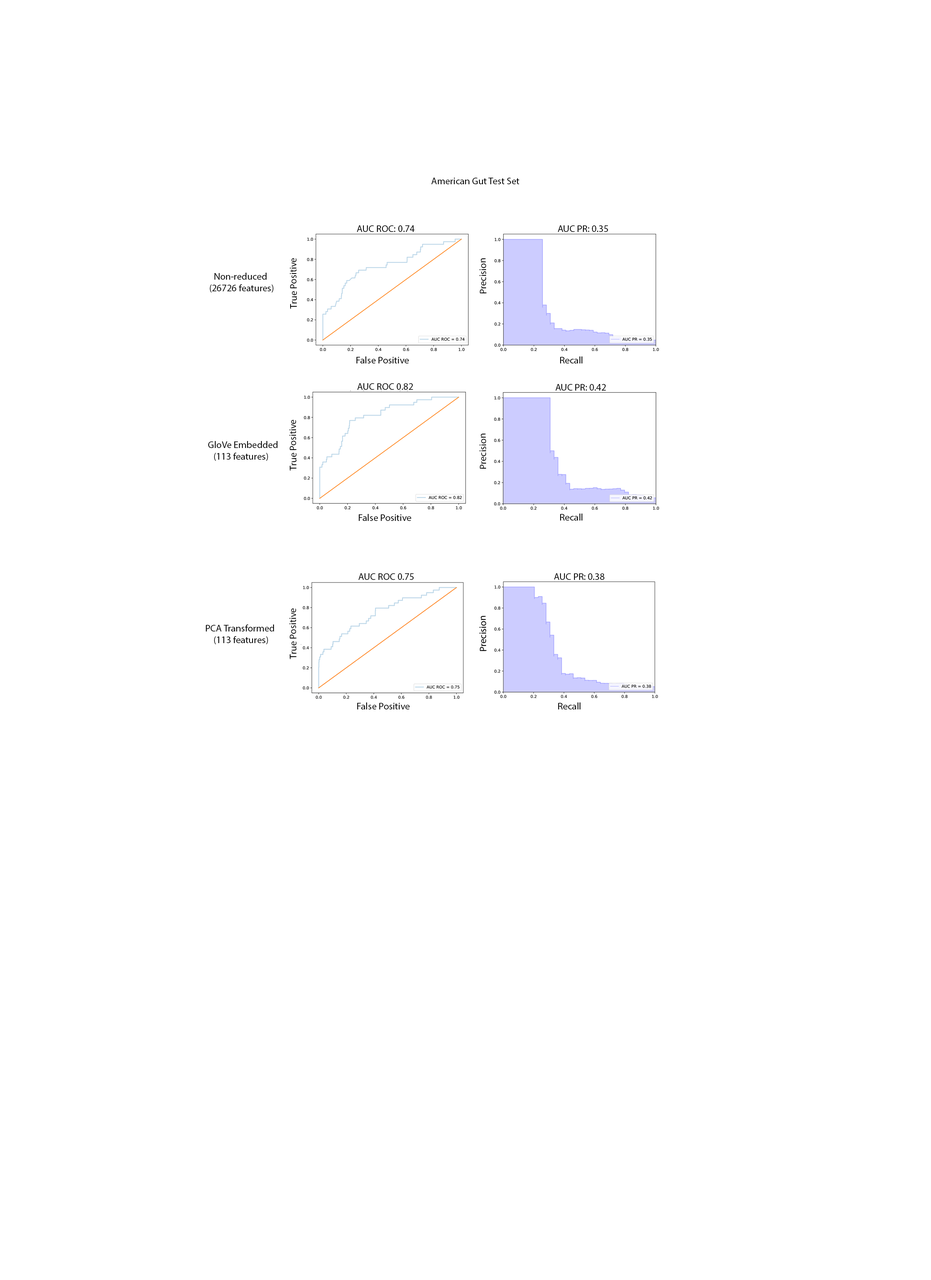
<style>
.page{position:relative;width:931px;height:1280px;background:#ffffff}
.page>*{position:absolute;margin:0}
.t1{font:9.7px "MyriadPro-Regular";color:#000000}
</style>
<div class="page">
<p class="t1" style="left:431px;top:178px;width:89px;height:6px">American Gut Test Set</p>
<p class="t1" style="left:357px;top:225px;width:58px;height:7px">AUC ROC: 0.74</p>
<p class="t1" style="left:558px;top:225px;width:50px;height:7px">AUC PR: 0.35</p>
<p class="t1" style="left:290px;top:258px;width:7px;height:51px;rotate:-91deg">True Positive</p>
<p class="t1" style="left:480px;top:258px;width:7px;height:36px;rotate:-91deg">Precision</p>
<p class="t1" style="left:210px;top:273px;width:64px;height:20px;text-align:center">Non-reduced<br> (26726 features)</p>
<p class="t1" style="left:357px;top:357px;width:52px;height:7px">False Positive</p>
<p class="t1" style="left:560px;top:357px;width:23px;height:7px">Recall</p>
<p class="t1" style="left:357px;top:383px;width:56px;height:7px">AUC ROC 0.82</p>
<p class="t1" style="left:556px;top:384px;width:50px;height:7px">AUC PR: 0.42</p>
<p class="t1" style="left:289px;top:420px;width:8px;height:51px;rotate:-91deg">True Positive</p>
<p class="t1" style="left:480px;top:434px;width:7px;height:35px;rotate:-91deg">Precision</p>
<p class="t1" style="left:208px;top:441px;width:70px;height:20px;text-align:center">GloVe Embedded<br> (113 features)</p>
<p class="t1" style="left:359px;top:514px;width:52px;height:7px">False Positive</p>
<p class="t1" style="left:560px;top:514px;width:23px;height:7px">Recall</p>
<p class="t1" style="left:359px;top:573px;width:55px;height:7px">AUC ROC 0.75</p>
<p class="t1" style="left:554px;top:573px;width:51px;height:7px">AUC PR: 0.38</p>
<p class="t1" style="left:289px;top:608px;width:8px;height:52px;rotate:-91deg">True Positive</p>
<p class="t1" style="left:206px;top:625px;width:68px;height:20px;text-align:center">PCA Transformed<br> (113 features)</p>
<p class="t1" style="left:357px;top:703px;width:53px;height:7px">False Positive</p>
<p class="t1" style="left:558px;top:703px;width:23px;height:7px">Recall</p>
</div>
